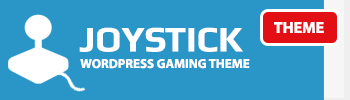
<style>
.page{position:relative;width:350px;height:100px;background:#2a96c8}
.page>*{position:absolute;margin:0}
.t1{font:36px "Play-Bold";color:#ffffff}
.t2{font:16px "MyriadPro-Bold";color:#ffffff}
.t3{font:13px "MyriadPro-Bold";color:#ffffff}
</style>
<div class="page">
<p class="t1" style="left:79px;top:27px;width:164px;height:25px">JOYSTICK</p>
<p class="t2" style="left:274px;top:22px;width:50px;height:11px">THEME</p>
<p class="t3" style="left:80px;top:59px;width:170px;height:10px">WORDPRESS GAMING THEME</p>
</div>
